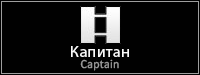
<style>
.page{position:relative;width:200px;height:75px;background:#010101}
.page>*{position:absolute;margin:0}
.t1{font:15.8px "MyriadPro-Regular";letter-spacing:0.02em;color:#f9f9f9;scale:1.03 1}
.t2{font:12.6px "Calibri";letter-spacing:0.02em;color:#9e9e9e;scale:0.96 1}
</style>
<div class="page">
<p class="t1" style="left:71px;top:46px;width:58px;height:11px">Капитан</p>
<p class="t2" style="left:80px;top:59px;width:39px;height:12px">Captain</p>
</div>
